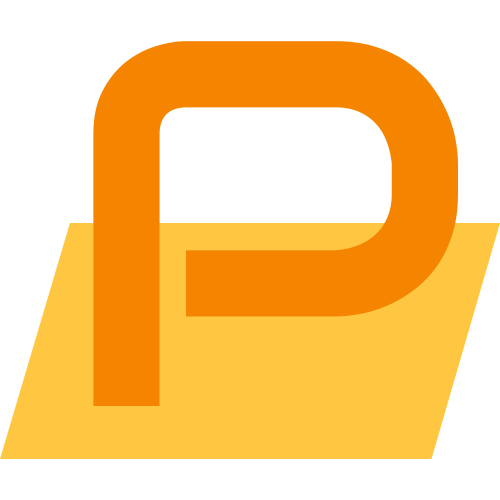
<style>
.page{position:relative;width:500px;height:500px;background:#ffffff}
.page>*{position:absolute;margin:0}
.t1{font:520.7px "Audiowide-Regular";color:#f58500}
</style>
<div class="page">
<p class="t1" style="left:93px;top:41px;width:365px;height:365px">P</p>
</div>
